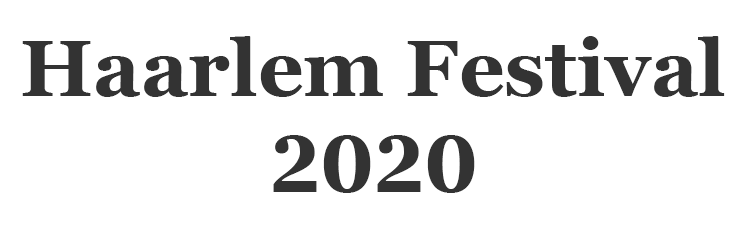
<style>
.page{position:relative;width:746px;height:236px;background:#ffffff}
.page>*{position:absolute;margin:0}
.t1{font:80px "GeorgiaPro-Bold";color:#333333}
</style>
<div class="page">
<p class="t1" style="left:22px;top:36px;width:703px;height:157px;text-align:center">Haarlem Festival<br>2020</p>
</div>
